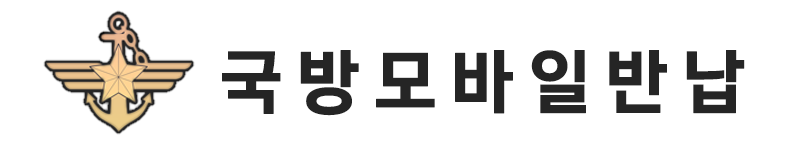
<style>
.page{position:relative;width:800px;height:160px;background:#ffffff}
.page>*{position:absolute;margin:0}
.t1{font:70px "NEXONLv2GothicBold";letter-spacing:0.2em;color:#252525;font-weight:bold}
</style>
<div class="page">
<p class="t1" style="left:222px;top:50px;width:523px;height:66px">국방모바일반납</p>
</div>
